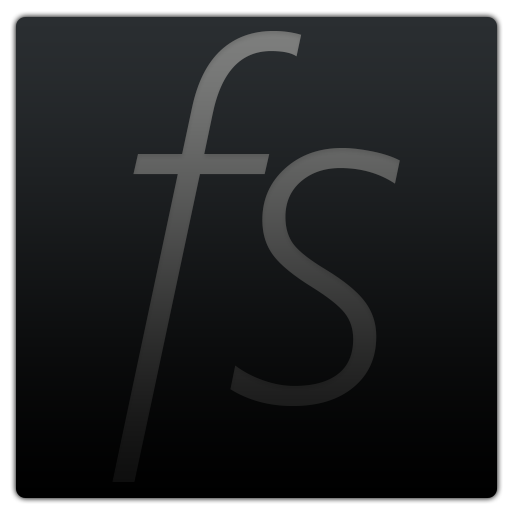
<style>
.page{position:relative;width:512px;height:512px}
.page>*{position:absolute;margin:0}
.t1{font:490.6px "SegoeUI-LightItalic";letter-spacing:-0.025em}
</style>
<div class="page">
<p class="t1" style="left:112px;top:31px;width:288px;height:451px">fs</p>
</div>
